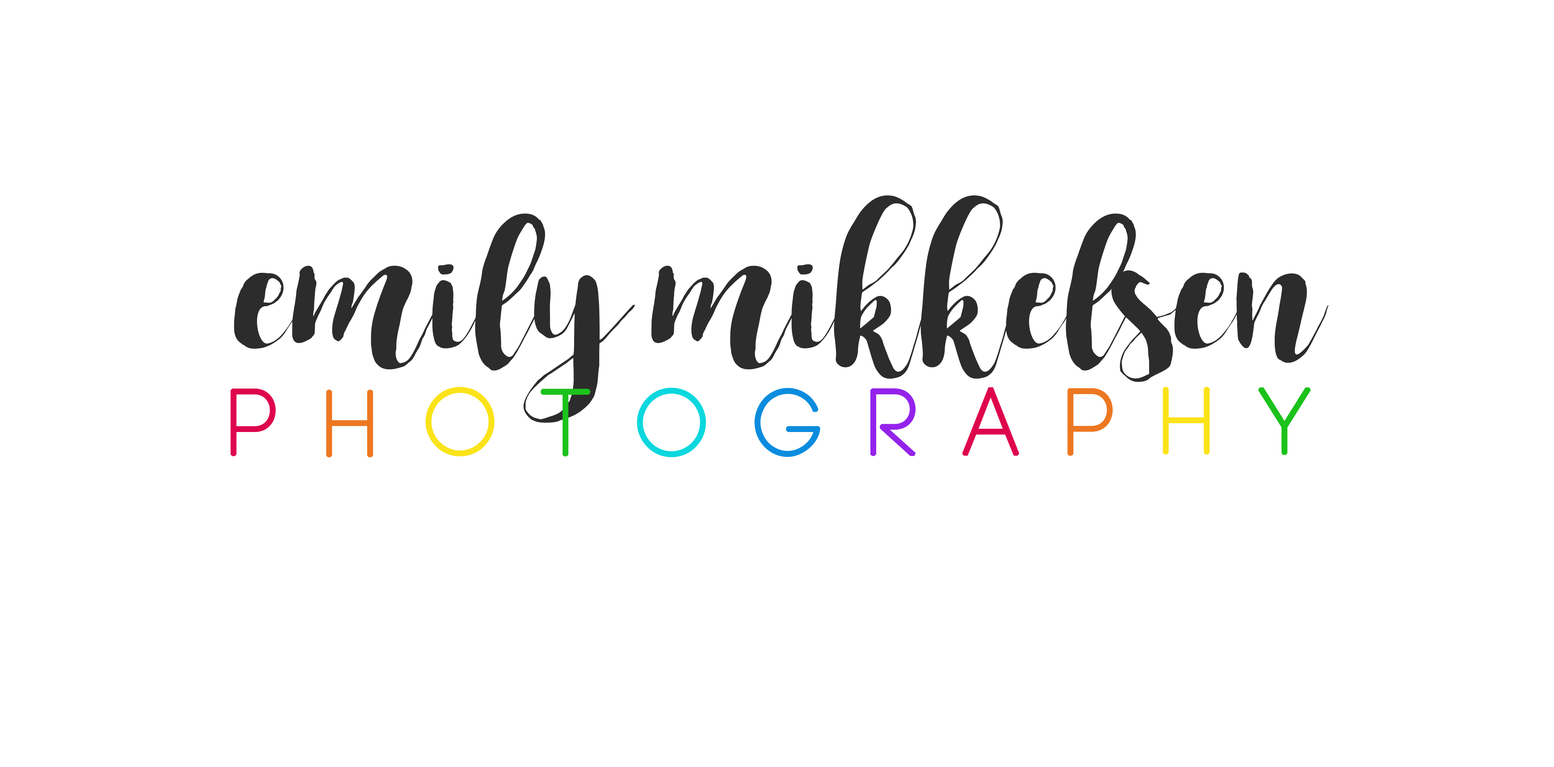
<style>
.page{position:relative;width:1554px;height:767px;background:#ffffff}
.page>*{position:absolute;margin:0}
.t1{font:160.6px "SpellingNight-Regular";color:#2c2c2c}
.t2{font:91px "Code-Pro-Light";letter-spacing:0.5em;color:#de054d;font-weight:bold}
.t3{font:91px "Code-Pro-Light";letter-spacing:0.5em;color:#fbe319;font-weight:bold}
.t4{font:91px "Code-Pro-Light";letter-spacing:0.5em;color:#1bc21b;font-weight:bold}
.t5{font:91px "Code-Pro-Light";letter-spacing:0.5em;color:#0ad7de;font-weight:bold}
.t6{font:91px "Code-Pro-Light";letter-spacing:0.5em;color:#0a8cde;font-weight:bold}
.t7{font:91px "Code-Pro-Light";letter-spacing:0.5em;color:#9422eb;font-weight:bold}
.t8{font:91px "Code-Pro-Light";letter-spacing:0.5em;color:#ed7721;font-weight:bold}
</style>
<div class="page">
<p class="t1" style="left:234px;top:195px;width:1095px;height:228px">emily mikkelsen</p>
<p class="t2" style="left:231px;top:389px;width:44px;height:67px">p</p>
<p class="t3" style="left:426px;top:388px;width:68px;height:68px">O</p>
<p class="t4" style="left:541px;top:389px;width:49px;height:67px">T</p>
<p class="t5" style="left:638px;top:388px;width:68px;height:69px">O</p>
<p class="t6" style="left:755px;top:389px;width:65px;height:67px">G</p>
<p class="t7" style="left:871px;top:389px;width:44px;height:67px">R</p>
<p class="t2" style="left:963px;top:388px;width:56px;height:67px">A</p>
<p class="t8" style="left:1068px;top:389px;width:44px;height:66px">P</p>
<p class="t3" style="left:1164px;top:388px;width:45px;height:66px">H</p>
<p class="t4" style="left:1259px;top:388px;width:52px;height:67px">Y</p>
<p class="t8" style="left:327px;top:390px;width:46px;height:67px">H</p>
</div>
